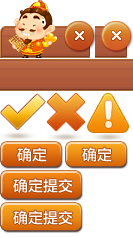
<style>
.page{position:relative;width:133px;height:237px;background:#ffffff}
.page>*{position:absolute;margin:0}
.t1{font:15px "FZLTZHK--GBK1-0";color:#ffffff}
</style>
<div class="page">
<p class="t1" style="left:17px;top:147px;width:30px;height:15px">确定</p>
<p class="t1" style="left:82px;top:147px;width:30px;height:15px">确定</p>
<p class="t1" style="left:13px;top:178px;width:60px;height:15px">确定提交</p>
<p class="t1" style="left:13px;top:210px;width:60px;height:15px">确定提交</p>
</div>
